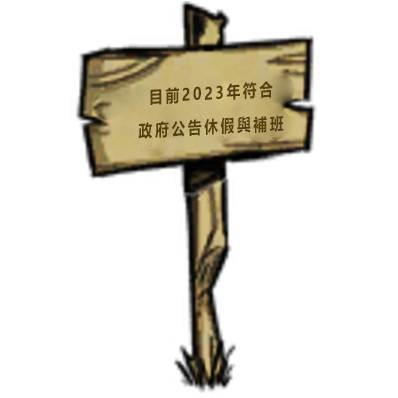
<style>
.page{position:relative;width:398px;height:398px;background:#ffffff}
.page>*{position:absolute;margin:0}
.t1{font:17px/17px "MicrosoftYaHei-Bold";letter-spacing:0.2em;color:#553e0d;scale:0.81 1}
</style>
<div class="page">
<p class="t1" style="left:138px;top:81px;width:146px;height:58px;text-align:center;rotate:-3deg">目前2023年符合<br><br>政府公告休假與補班</p>
</div>
